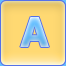
<style>
.page{position:relative;width:66px;height:66px}
.page>*{position:absolute;margin:0}
.t1{font:41px "Tahoma-Bold"}
</style>
<div class="page">
<p class="t1" style="left:20px;top:17px;width:29px;height:30px">А</p>
<p class="t1" style="left:20px;top:17px;width:29px;height:30px">А</p>
</div>
